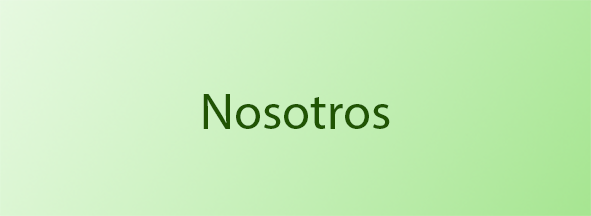
<style>
.page{position:relative;width:591px;height:216px}
.page>*{position:absolute;margin:0}
.t1{font:51.1px "MyriadPro-Regular";color:#205403}
</style>
<div class="page">
<p class="t1" style="left:203px;top:94px;width:187px;height:35px">Nosotros</p>
</div>
